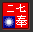
<style>
.page{position:relative;width:33px;height:32px;background:#f20000}
.page>*{position:absolute;margin:0}
.t1{font:10.4px "SimSun";color:#ffffff}
.t2{font:11.7px "SimSun";color:#ffffff}
</style>
<div class="page">
<p class="t1" style="left:7px;top:4px;width:19px;height:8px">二七</p>
<p class="t2" style="left:16px;top:15px;width:11px;height:12px">奉</p>
</div>
